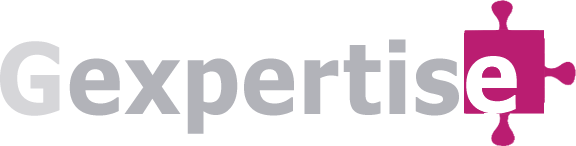
<style>
.page{position:relative;width:576px;height:146px;background:#ffffff}
.page>*{position:absolute;margin:0}
.t1{font:97.9px "Tahoma-Bold";letter-spacing:0.04em;color:#b2b3b9;scale:0.94 1}
.t2{font:97.9px "Tahoma-Bold";letter-spacing:0.04em;color:#d6d6d9;scale:0.94 1}
</style>
<div class="page">
<p class="t1" style="left:0px;top:39px;width:459px;height:95px"><span class="t2">G</span>expertis</p>
</div>
